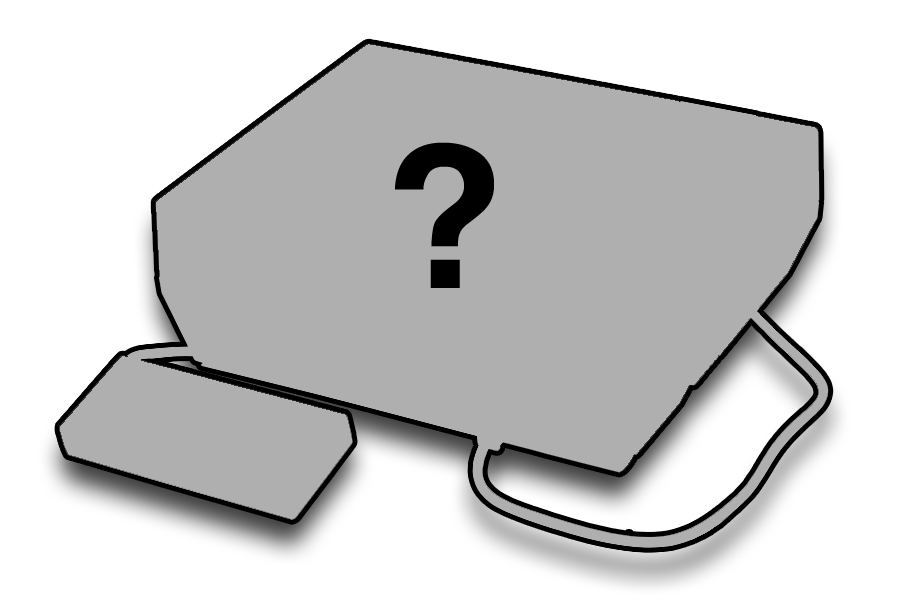
<style>
.page{position:relative;width:900px;height:600px;background:#afafaf}
.page>*{position:absolute;margin:0}
.t1{font:200px "Helvetica-Bold";color:#000000}
</style>
<div class="page">
<p class="t1" style="left:394px;top:142px;width:100px;height:146px">?</p>
</div>
